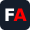
<style>
.page{position:relative;width:30px;height:30px;background:#141d2a}
.page>*{position:absolute;margin:0}
.t1{font:17px "DejaVuSans-Bold";color:#ffffff}
.t2{font:17px "DejaVuSans-Bold";color:#ff0000}
</style>
<div class="page">
<p class="t1" style="left:5px;top:8px;width:22px;height:13px">F<span class="t2">A</span></p>
</div>
